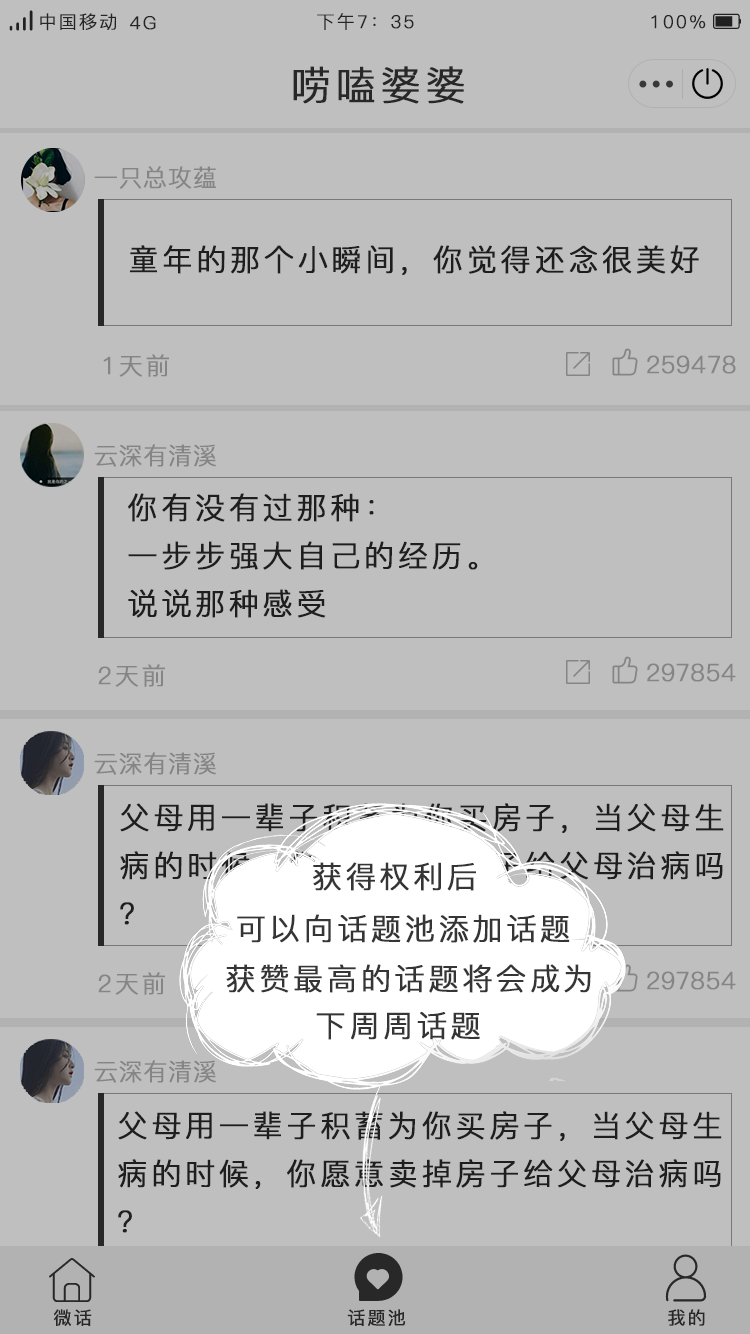
<style>
.page{position:relative;width:750px;height:1334px;background:#bfbfbf}
.page>*{position:absolute;margin:0}
.t1{font:18px "PingFang-SC-Regular";letter-spacing:0.1em;color:#323232;font-weight:bold}
.t2{font:40px "PingFang-SC-Regular";letter-spacing:0.1em;color:#353535;font-weight:bold}
.t3{font:24px "PingFang-SC-Regular";letter-spacing:0.1em;color:#858585;font-weight:bold}
.t4{font:30px "PingFang-SC-Regular";letter-spacing:0.1em;color:#282828;font-weight:bold}
.t5{font:30px/48px "PingFang-SC-Regular";letter-spacing:0.1em;color:#282828;font-weight:bold}
.t6{font:30px "PingFang-SC-Regular";letter-spacing:0.1em;color:#353535;font-weight:bold}
.t7{font:18px "PingFang-SC-Medium";letter-spacing:0.1em;color:#353535;font-weight:bold}
</style>
<div class="page">
<p class="t1" style="left:40px;top:13px;width:76px;height:18px">中国移动</p>
<p class="t1" style="left:130px;top:16px;width:26px;height:14px">4G</p>
<p class="t1" style="left:317px;top:13px;width:97px;height:17px">下午7：35</p>
<p class="t1" style="left:651px;top:15px;width:55px;height:14px">100%</p>
<p class="t2" style="left:293px;top:66px;width:171px;height:38px">唠嗑婆婆</p>
<p class="t3" style="left:94px;top:166px;width:122px;height:23px">一只总攻蕴</p>
<p class="t4" style="left:130px;top:245px;width:569px;height:30px">童年的那个小瞬间，你觉得还念很美好</p>
<p class="t3" style="left:103px;top:354px;width:66px;height:23px">1天前</p>
<p class="t3" style="left:647px;top:355px;width:89px;height:19px">259478</p>
<p class="t3" style="left:94px;top:444px;width:122px;height:23px">云深有清溪</p>
<p class="t5" style="left:128px;top:493px;width:350px;height:125px">你有没有过那种：<br>一步步强大自己的经历。<br>说说那种感受</p>
<p class="t3" style="left:98px;top:664px;width:67px;height:23px">2天前</p>
<p class="t3" style="left:647px;top:663px;width:89px;height:19px">297854</p>
<p class="t3" style="left:94px;top:752px;width:122px;height:23px">云深有清溪</p>
<p class="t5" style="left:120px;top:803px;width:604px;height:122px">父母用一辈子积蓄为你买房子，当父母生<br>病的时候，你愿意卖掉房子给父母治病吗<br>？</p>
<p class="t6" style="left:313px;top:862px;width:163px;height:29px">获得权利后</p>
<p class="t6" style="left:237px;top:914px;width:333px;height:29px">可以向话题池添加话题</p>
<p class="t6" style="left:226px;top:964px;width:365px;height:29px">获赞最高的话题将会成为</p>
<p class="t3" style="left:98px;top:972px;width:67px;height:23px">2天前</p>
<p class="t3" style="left:647px;top:971px;width:89px;height:19px">297854</p>
<p class="t6" style="left:316px;top:1012px;width:164px;height:28px">下周周话题</p>
<p class="t3" style="left:94px;top:1060px;width:122px;height:23px">云深有清溪</p>
<p class="t5" style="left:118px;top:1111px;width:604px;height:122px">父母用一辈子积蓄为你买房子，当父母生<br>病的时候，你愿意卖掉房子给父母治病吗<br>？</p>
<p class="t7" style="left:54px;top:1309px;width:38px;height:17px">微话</p>
<p class="t7" style="left:347px;top:1309px;width:59px;height:17px">话题池</p>
<p class="t7" style="left:668px;top:1309px;width:37px;height:17px">我的</p>
</div>
